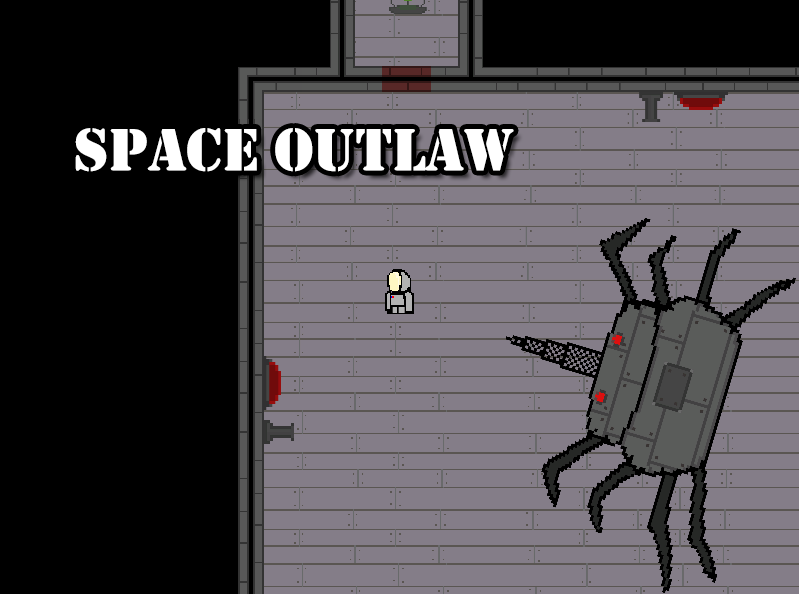
<style>
.page{position:relative;width:799px;height:594px;background:#847d88}
.page>*{position:absolute;margin:0}
.t1{font:61.9px "Stencil";color:#ffffff}
</style>
<div class="page">
<p class="t1" style="left:75px;top:128px;width:439px;height:44px">Space Outlaw</p>
</div>
